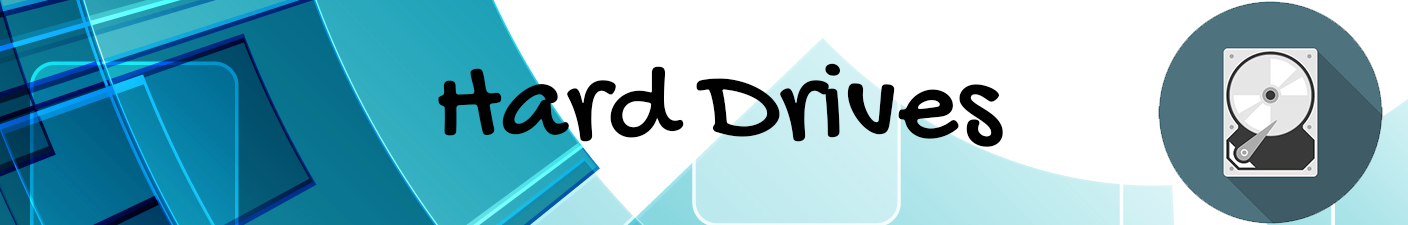
<style>
.page{position:relative;width:1408px;height:225px;background:#ffffff}
.page>*{position:absolute;margin:0}
.t1{font:116.7px "GochiHand-Regular";color:#000000}
</style>
<div class="page">
<p class="t1" style="left:438px;top:63px;width:565px;height:84px">Hard Drives</p>
</div>
